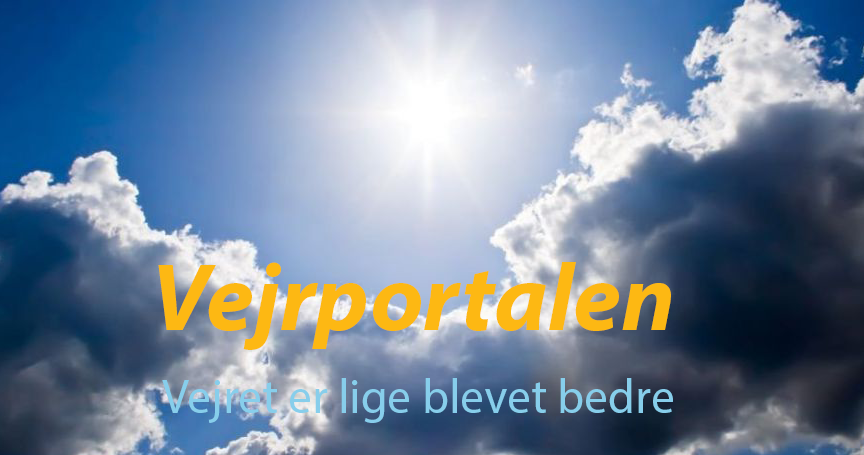
<style>
.page{position:relative;width:864px;height:455px}
.page>*{position:absolute;margin:0}
.t1{font:96px "MyriadPro-BoldIt";color:#fdb813}
.t2{font:48px "MyriadPro-Regular";color:#87ceeb}
</style>
<div class="page">
<p class="t1" style="left:158px;top:262px;width:513px;height:88px">Vejrportalen</p>
<p class="t2" style="left:162px;top:378px;width:511px;height:45px">Vejret er lige blevet bedre</p>
</div>
